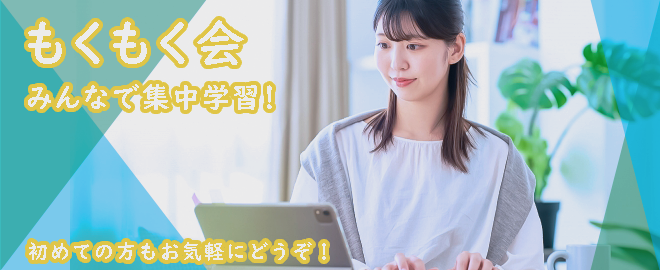
<style>
.page{position:relative;width:660px;height:270px}
.page>*{position:absolute;margin:0}
.t1{font:50px "UDDigiKyokashoNK-B";letter-spacing:0.08em;color:#ffffff}
.t2{font:28px "UDDigiKyokashoNK-B";letter-spacing:0.08em;color:#ffffff}
.t3{font:20px "UDDigiKyokashoNP-B";letter-spacing:0.08em;color:#ffffff}
</style>
<div class="page">
<p class="t1" style="left:28px;top:20px;width:216px;height:45px">もくもく会</p>
<p class="t2" style="left:28px;top:84px;width:244px;height:26px">みんなで集中学習！</p>
<p class="t3" style="left:29px;top:242px;width:297px;height:19px">初めての方もお気軽にどうぞ！</p>
</div>
